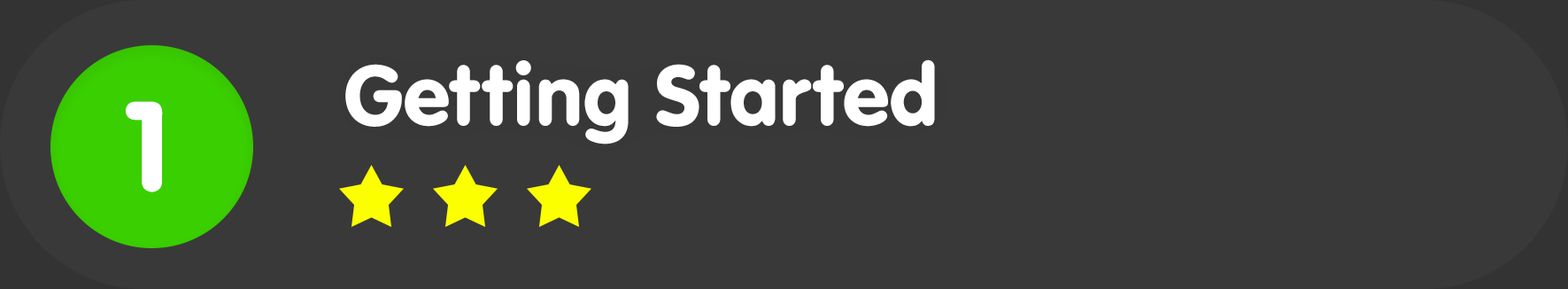
<style>
.page{position:relative;width:1568px;height:289px;background:#393939}
.page>*{position:absolute;margin:0}
.t1{font:88.5px "VAGRundschriftD";color:#ffffff}
.t2{font:132.8px "VAGRundschriftD";color:#ffffff}
</style>
<div class="page">
<p class="t1" style="left:345px;top:59px;width:590px;height:85px">Getting Started</p>
<p class="t2" style="left:126px;top:101px;width:37px;height:91px">1</p>
</div>
